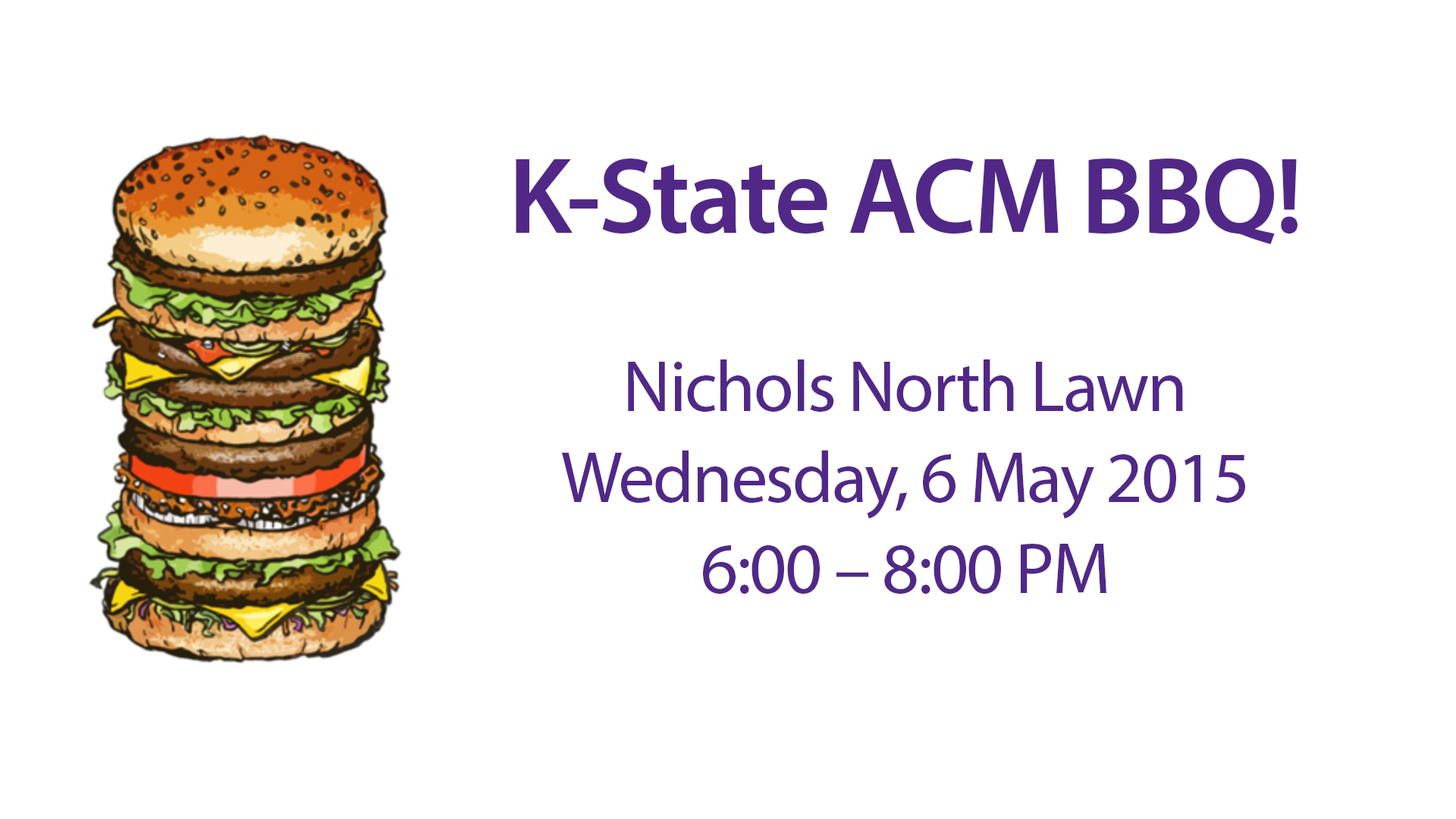
<style>
.page{position:relative;width:1456px;height:819px;background:#ffffff}
.page>*{position:absolute;margin:0}
.t1{font:109.2px "MyriadPro-Semibold";letter-spacing:-0.025em;color:#512888}
.t2{font:72.8px/91px "MyriadPro-Regular";letter-spacing:-0.025em;color:#512888}
</style>
<div class="page">
<p class="t1" style="left:516px;top:158px;width:781px;height:86px">K-State ACM BBQ!</p>
<p class="t2" style="left:562px;top:359px;width:683px;height:235px;text-align:center">Nichols North Lawn<br>Wednesday, 6 May 2015<br>6:00 – 8:00 PM</p>
</div>
